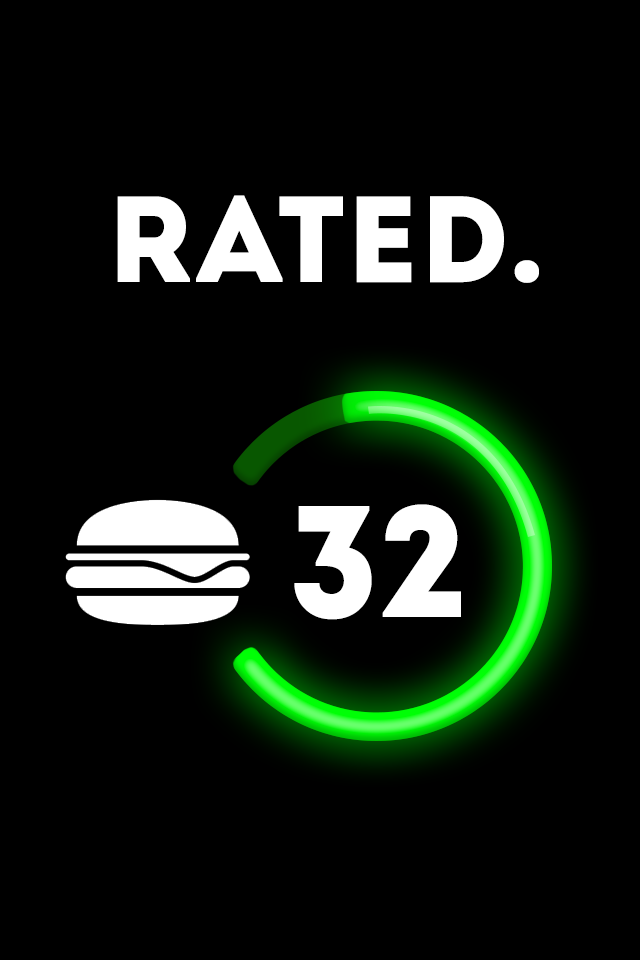
<style>
.page{position:relative;width:640px;height:960px;background:#000000}
.page>*{position:absolute;margin:0}
.t1{font:122px "Intro";color:#ffffff}
.t2{font:158.1px "Intro";color:#ffffff}
</style>
<div class="page">
<p class="t1" style="left:117px;top:195px;width:422px;height:88px">RATED.</p>
<p class="t2" style="left:294px;top:504px;width:167px;height:116px">32</p>
</div>
